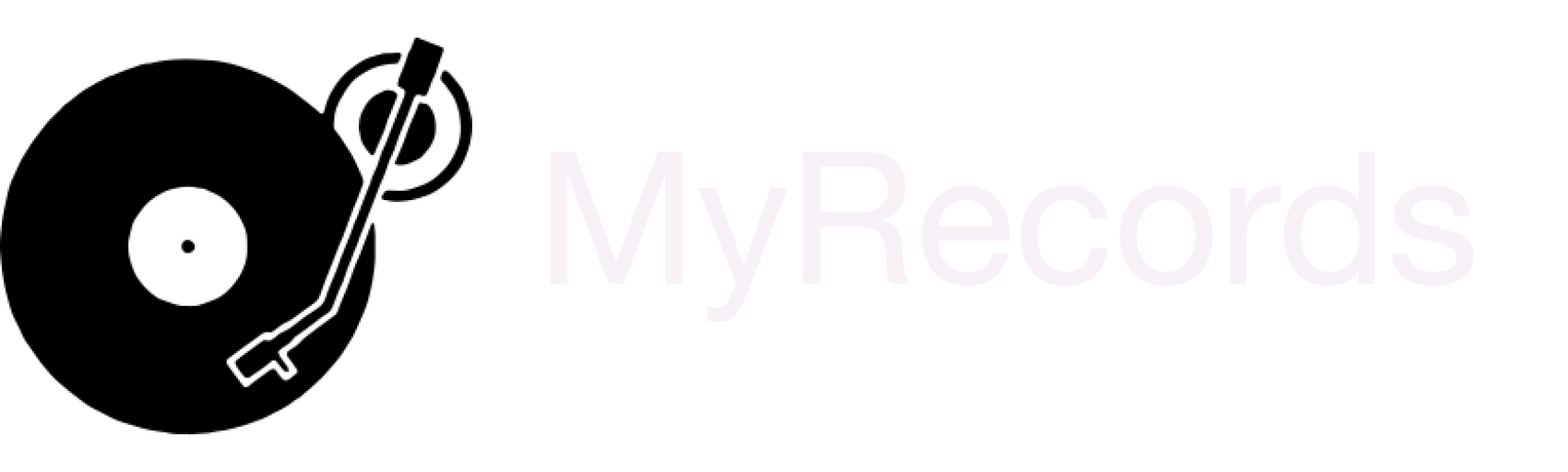
<style>
.page{position:relative;width:1568px;height:472px;background:#ffffff}
.page>*{position:absolute;margin:0}
.t1{font:184.5px "HelveticaNeue";color:#f8f2f8}
</style>
<div class="page">
<p class="t1" style="left:551px;top:151px;width:923px;height:171px">MyRecords</p>
</div>
